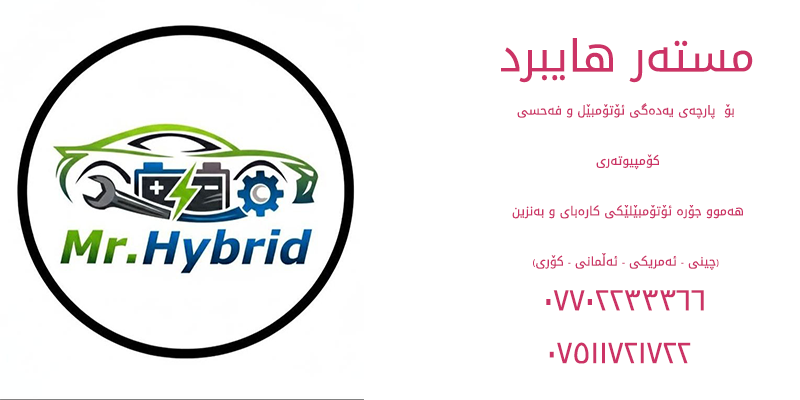
<style>
.page{position:relative;width:800px;height:400px;background:#ffffff}
.page>*{position:absolute;margin:0}
.t1{font:43.9px "NotoKufiArabic";color:#cc3366}
.t2{font:12.4px/50.4px "NotoKufiArabic";color:#cc3366}
.t3{font:22.6px/50.4px "NotoKufiArabic";color:#cc3366}
.t4{font:12.4px/50.4px "MyriadArabic-Regular";color:#cc3366}
.t5{font:30px "NotoKufiArabic";color:#cc3366}
.t6{font:30px "MyriadPro-Regular";color:#cc3366}
</style>
<div class="page">
<p class="t1" style="left:501px;top:38px;width:252px;height:45px">مستەر هایبرد</p>
<p class="t2" style="left:512px;top:103px;width:231px;height:167px;text-align:center"><span class="t3"><br></span>بۆ  پارچەی یەدەگی ئۆتۆمبێل و فەحسی<br> کۆمپیوتەری<br> هەموو جۆرە ئۆتۆمبێلێکی کارەبای و بەنزین<br><span class="t4">(</span>چینی <span class="t4">-</span> ئەمریكی <span class="t4">-</span> ئەڵمانی <span class="t4">-</span> کۆری<span class="t4">)</span></p>
<p class="t5" style="left:546px;top:290px;width:158px;height:21px">٠٧٧٠٢٢٣٣٣٦٦</p>
<p class="t5" style="left:549px;top:342px;width:142px;height:22px"><span class="t6"><br></span>٠٧٥١١٧٢١٧٢٢</p>
</div>
